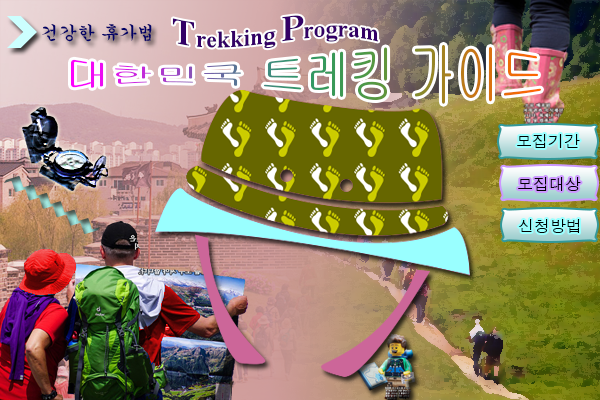
<style>
.page{position:relative;width:600px;height:400px}
.page>*{position:absolute;margin:0}
.t1{font:24px "TimesNewRomanPS-BoldMT";color:#330066}
.t2{font:36px "TimesNewRomanPS-BoldMT";color:#330066}
.t3{font:17.8px "Gungsuh";color:#000066}
.t4{font:15.9px "Dotum";color:#000000}
</style>
<div class="page">
<p class="t1" style="left:172px;top:15px;width:207px;height:34px"><span class="t2">T</span>rekking <span class="t2">P</span>rogram</p>
<p class="t3" style="left:42px;top:23px;width:110px;height:19px">건강한 휴가법</p>
<p class="t4" style="left:517px;top:134px;width:63px;height:14px">모집기간</p>
<p class="t4" style="left:518px;top:177px;width:63px;height:14px">모집대상</p>
<p class="t4" style="left:518px;top:219px;width:62px;height:14px">신청방법</p>
</div>
